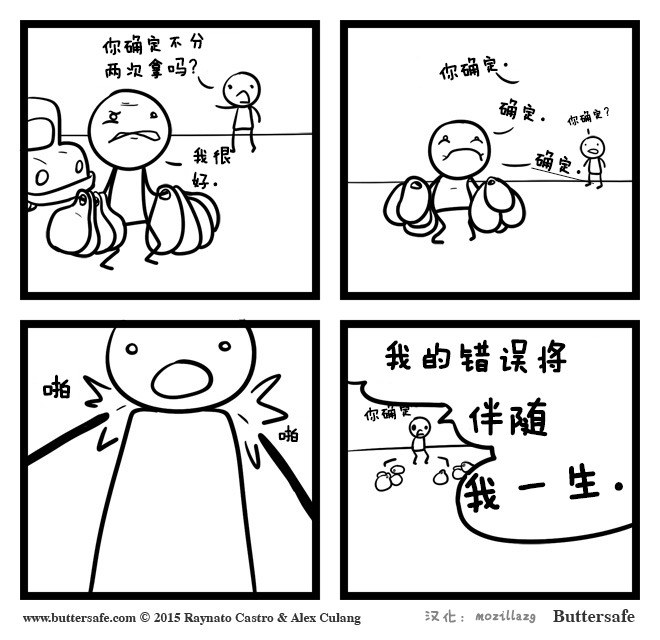
<style>
.page{position:relative;width:660px;height:640px;background:#ffffff}
.page>*{position:absolute;margin:0}
.t1{font:20.8px/25px "FZMWJW--GB1-0";color:#000000;font-weight:bold}
.t2{font:20.8px "FZMWJW--GB1-0";color:#000000;font-weight:bold}
.t3{font:12.5px "FZMWJW--GB1-0";color:#000000;font-weight:bold}
.t4{font:20.8px "FZMWJW--GB1-0";color:#000000;font-weight:bold;text-decoration:underline}
.t5{font:37.5px/29.2px "FZMWJW--GB1-0";color:#000000;font-weight:bold}
.t6{font:41.7px/29.2px "FZMWJW--GB1-0";color:#000000;font-weight:bold}
.t7{font:29.2px "FZMWJW--GB1-0";color:#000000;font-weight:bold}
.t8{font:16.7px "FZMWJW--GB1-0";color:#000000;font-weight:bold}
.t9{font:50px "FZMWJW--GB1-0";color:#000000;font-weight:bold}
.t10{font:41.7px "FZMWJW--GB1-0";color:#000000;font-weight:bold}
.t11{font:45.8px "FZMWJW--GB1-0";color:#000000;font-weight:bold}
.t12{font:16.7px "FZMWJW--GB1-0";color:#858585;font-weight:bold}
</style>
<div class="page">
<p class="t1" style="left:102px;top:32px;width:102px;height:47px;rotate:-3deg">你确定不分<br>两次拿吗？</p>
<p class="t2" style="left:439px;top:55px;width:69px;height:26px;rotate:-11deg">你确定。</p>
<p class="t2" style="left:499px;top:98px;width:46px;height:24px;rotate:12deg">确定。</p>
<p class="t3" style="left:567px;top:107px;width:42px;height:19px;rotate:-15deg">你确定？</p>
<p class="t1" style="left:191px;top:146px;width:40px;height:44px">我很<br>好。</p>
<p class="t4" style="left:531px;top:149px;width:63px;height:35px;rotate:14deg">确定。</p>
<p class="t5" style="left:385px;top:339px;width:182px;height:98px">我的错误将<br> <br>      <span class="t6">伴随</span></p>
<p class="t7" style="left:43px;top:374px;width:28px;height:25px">啪</p>
<p class="t8" style="left:364px;top:403px;width:48px;height:19px;rotate:-8deg">你确定</p>
<p class="t2" style="left:278px;top:425px;width:21px;height:17px">啪</p>
<p class="t9" style="left:463px;top:463px;width:160px;height:50px;rotate:-7deg"><span class="t10"><br></span>我一生<span class="t11">。</span></p>
<p class="t12" style="left:425px;top:609px;width:111px;height:15px">汉化：mozillazg</p>
</div>
